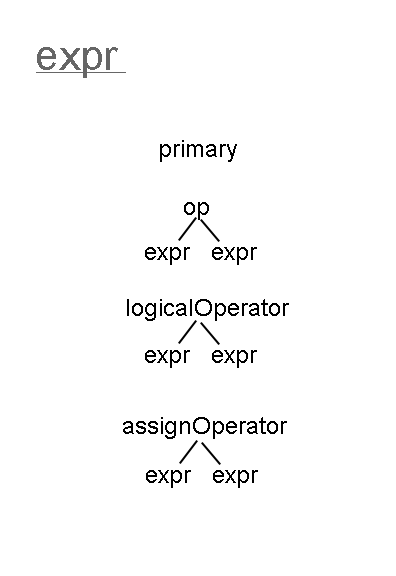
<style>
.page{position:relative;width:396px;height:576px;background:#ffffff}
.page>*{position:absolute;margin:0}
.t1{font:42px "ArialMT";color:#666666}
.t2{font:12px "ArialMT";color:#000000}
</style>
<div class="page">
<p class="t1" style="left:37px;top:47px;width:81px;height:31px">expr</p>
<p class="t2" style="left:160px;top:140px;width:77px;height:22px">primary</p>
<p class="t2" style="left:184px;top:202px;width:25px;height:18px">op</p>
<p class="t2" style="left:145px;top:247px;width:45px;height:18px">expr</p>
<p class="t2" style="left:212px;top:247px;width:45px;height:18px">expr</p>
<p class="t2" style="left:127px;top:299px;width:162px;height:22px">logicalOperator</p>
<p class="t2" style="left:145px;top:350px;width:45px;height:18px">expr</p>
<p class="t2" style="left:212px;top:350px;width:45px;height:18px">expr</p>
<p class="t2" style="left:123px;top:417px;width:164px;height:22px">assignOperator</p>
<p class="t2" style="left:146px;top:470px;width:45px;height:18px">expr</p>
<p class="t2" style="left:213px;top:470px;width:45px;height:18px">expr</p>
</div>
